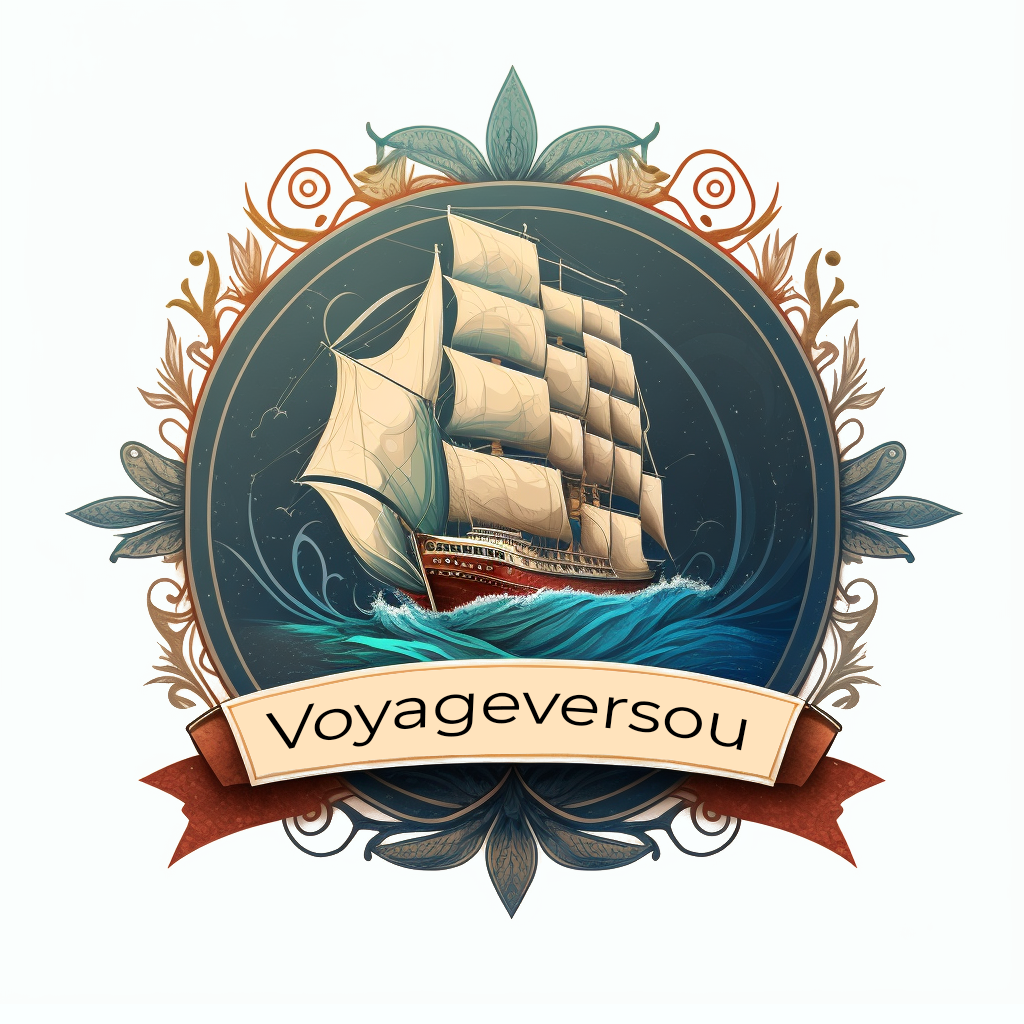
<style>
.page{position:relative;width:1024px;height:1024px;background:#fafefd}
.page>*{position:absolute;margin:0}
.t1{font:60px "Montserrat-Regular";color:#000000}
</style>
<div class="page">
<p class="t1" style="left:265px;top:692px;width:482px;height:59px;rotate:8deg">Voyageversou</p>
</div>
